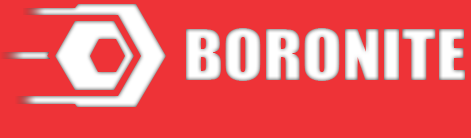
<style>
.page{position:relative;width:471px;height:138px;background:#ee3337}
.page>*{position:absolute;margin:0}
.t1{font:65px "Impact";color:#ffffff;scale:1.12 1}
</style>
<div class="page">
<p class="t1" style="left:186px;top:28px;width:279px;height:53px">BORONITE</p>
</div>
